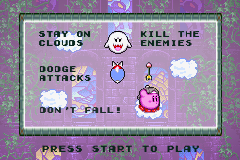
<style>
.page{position:relative;width:240px;height:160px}
.page>*{position:absolute;margin:0}
.t1{font:7.5px "GamegirlClassic";color:#0a271c}
.t2{font:7.5px "GamegirlClassic";color:#1b2d29}
.t3{font:8.3px "GamegirlClassic";color:#0a271c}
</style>
<div class="page">
<p class="t1" style="left:140px;top:31px;width:60px;height:15px">KILL THE<br>ENEMIES</p>
<p class="t1" style="left:39px;top:66px;width:52px;height:15px">DODGE<br>ATTACKS</p>
<p class="t2" style="left:40px;top:107px;width:80px;height:6px">DON'T FALL!</p>
<p class="t3" style="left:42px;top:145px;width:157px;height:7px">PRESS START TO PLAY</p>
</div>
